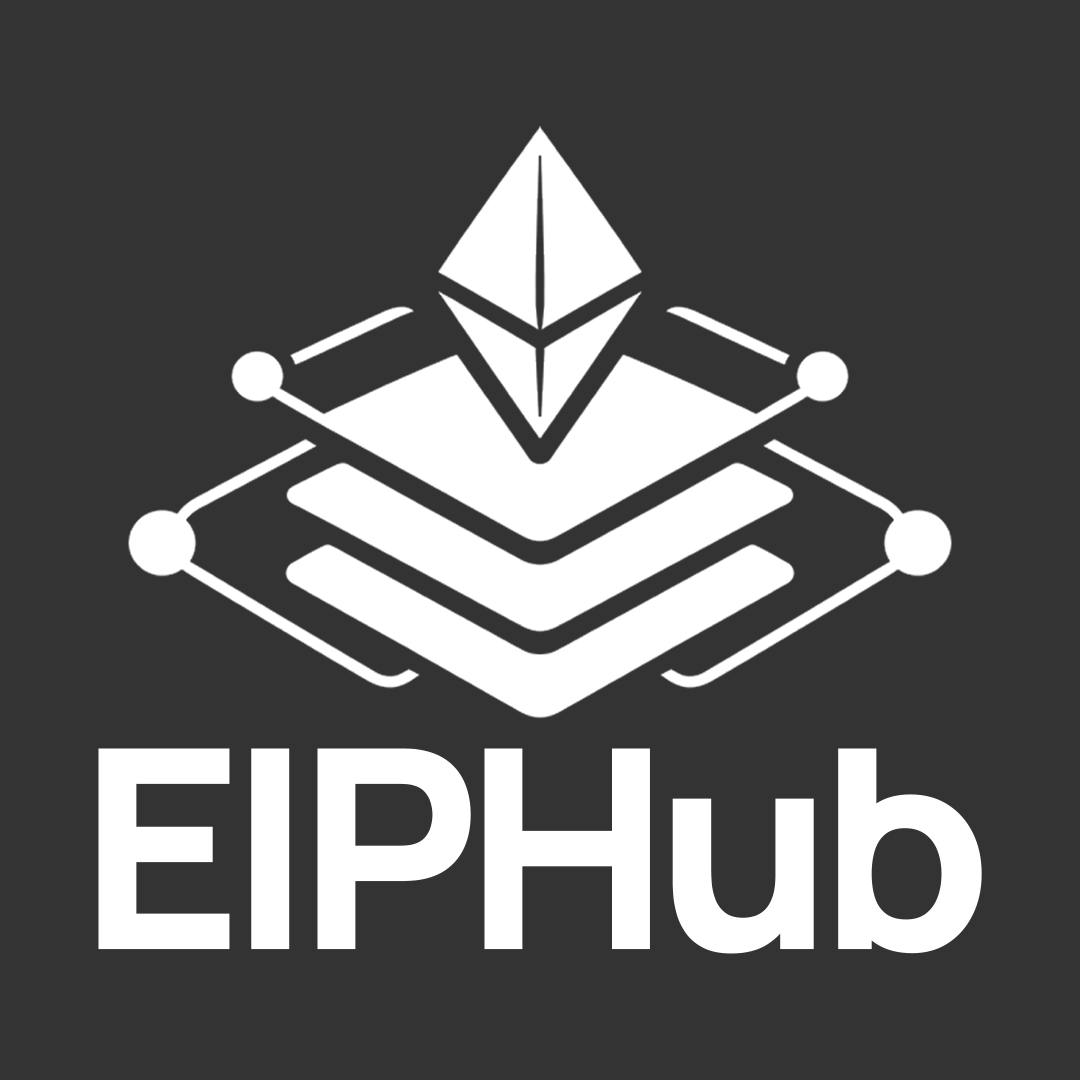
<style>
.page{position:relative;width:1080px;height:1080px;background:#333333}
.page>*{position:absolute;margin:0}
.t1{font:278.5px "Manrope-ExtraBold";letter-spacing:-0.05em;color:#ffffff}
</style>
<div class="page">
<p class="t1" style="left:98px;top:748px;width:884px;height:206px">EIPHub</p>
</div>
